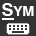
<style>
.page{position:relative;width:36px;height:36px;background:#333333}
.page>*{position:absolute;margin:0}
.t1{font:14px "Swiss721BT-Bold";color:#ffffff}
.t2{font:18px "Swiss721BT-Bold";color:#ffffff}
</style>
<div class="page">
<p class="t1" style="left:2px;top:3px;width:32px;height:13px"><span class="t2">S</span>YM</p>
</div>
